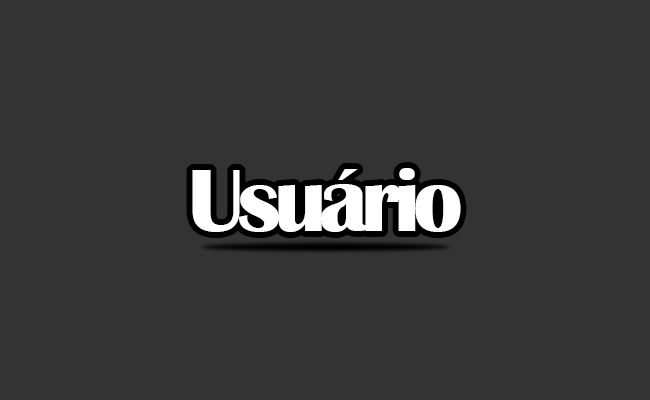
<style>
.page{position:relative;width:650px;height:400px;background:#333333}
.page>*{position:absolute;margin:0}
.t1{font:158.5px "BritannicBold";letter-spacing:-0.075em;color:#ffffff}
</style>
<div class="page">
<p class="t1" style="left:192px;top:168px;width:269px;height:64px">Usuário</p>
</div>
